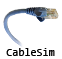
<style>
.page{position:relative;width:62px;height:59px;background:#ffffff}
.page>*{position:absolute;margin:0}
.t1{font:11px "Consolas";color:#000000}
</style>
<div class="page">
<p class="t1" style="left:6px;top:48px;width:49px;height:8px">CableSim</p>
</div>
